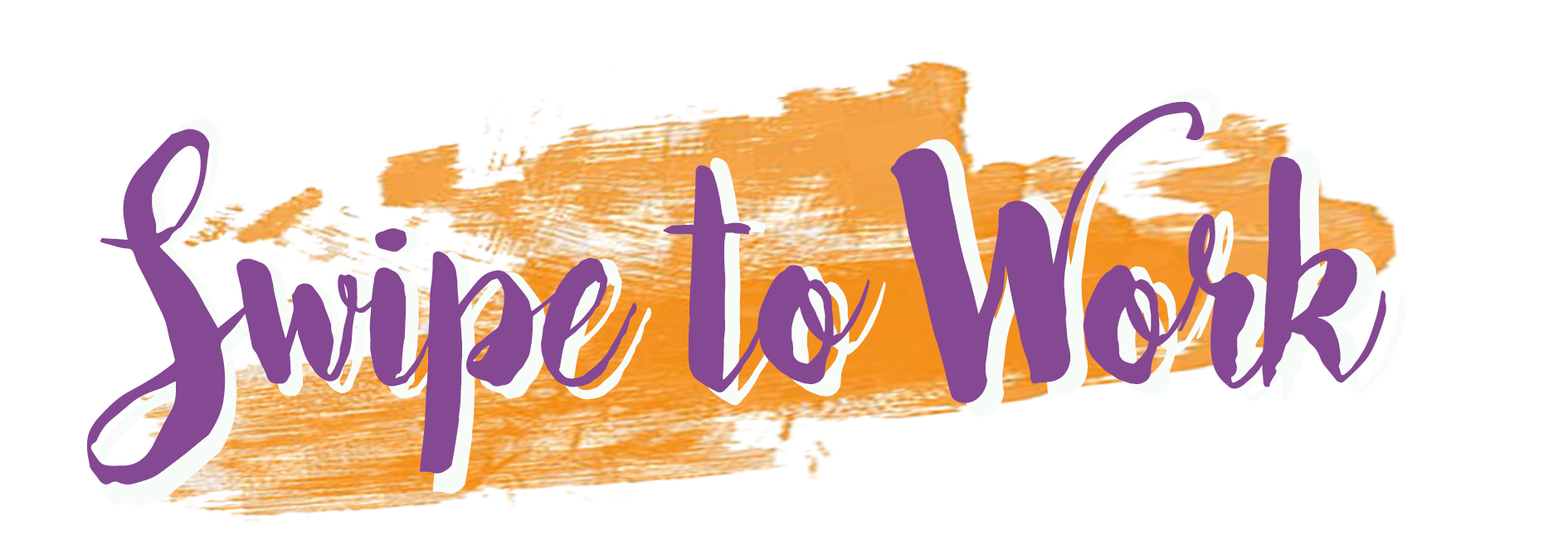
<style>
.page{position:relative;width:1568px;height:555px;background:#ffffff}
.page>*{position:absolute;margin:0}
.t1{font:401.5px "Bakery";scale:0.75 1}
.t2{font:368.3px "Bakery";color:#854893;scale:0.81 1}
</style>
<div class="page">
<p class="t1" style="left:97px;top:88px;width:1309px;height:418px">Swipe to Work</p>
<p class="t2" style="left:87px;top:101px;width:1299px;height:384px">Swipe to Work</p>
</div>
